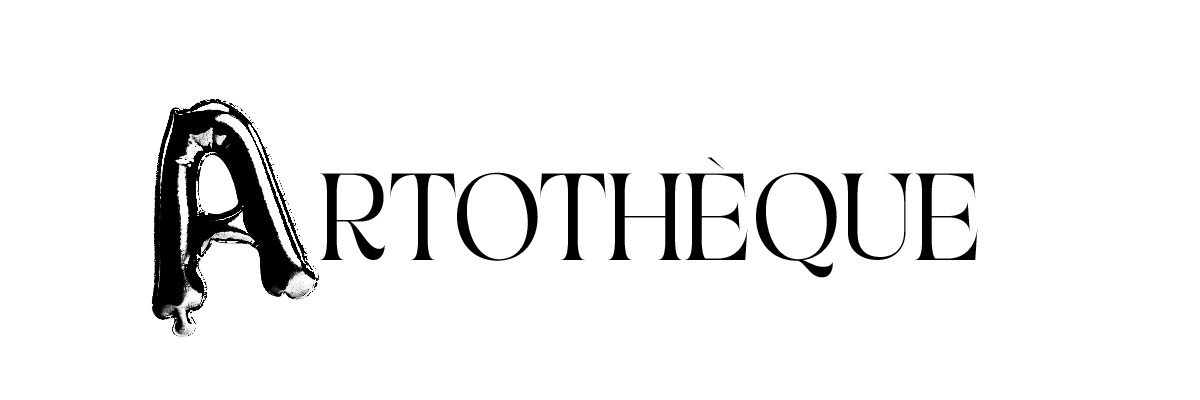
<style>
.page{position:relative;width:1200px;height:400px;background:#ffffff}
.page>*{position:absolute;margin:0}
.t1{font:99.9px "Qalogre";letter-spacing:0.005em;color:#000000}
</style>
<div class="page">
<p class="t1" style="left:320px;top:157px;width:658px;height:121px">RTOTHÈQUE</p>
</div>
